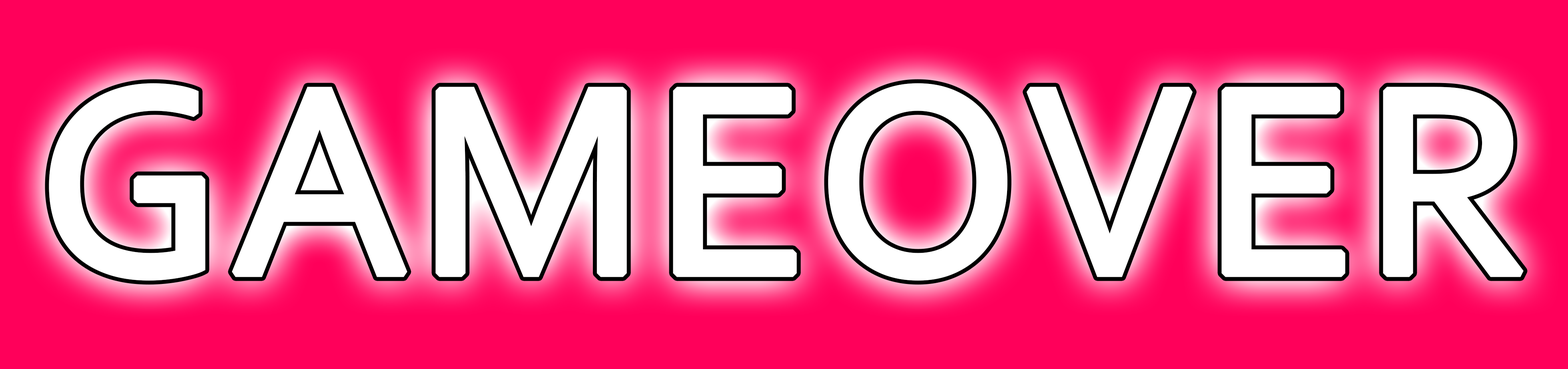
<style>
.page{position:relative;width:1568px;height:369px;background:#ff005a}
.page>*{position:absolute;margin:0}
.t1{font:279.9px "Corbel";color:#ffffff;font-weight:bold}
</style>
<div class="page">
<p class="t1" style="left:49px;top:83px;width:1475px;height:198px">GAMEOVER</p>
</div>
